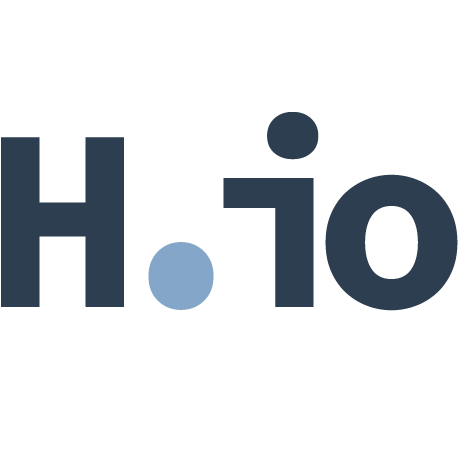
<style>
.page{position:relative;width:459px;height:459px;background:#ffffff}
.page>*{position:absolute;margin:0}
.t1{font:260px "SourceCodePro-Bold";letter-spacing:-0.175em;color:#2c3e50}
.t2{font:400px "SourceCodePro-Regular";letter-spacing:-0.33em;color:#83a6c9}
</style>
<div class="page">
<p class="t1" style="left:1px;top:112px;width:457px;height:199px">H io</p>
<p class="t2" style="left:148px;top:242px;width:66px;height:68px">.</p>
</div>
